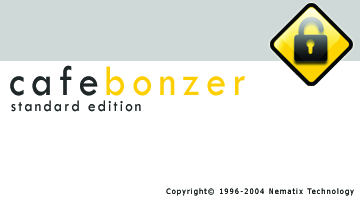
<style>
.page{position:relative;width:360px;height:200px;background:#ffffff}
.page>*{position:absolute;margin:0}
.t1{font:45px "TwCenMT-Regular";letter-spacing:0.2em;color:#fecf00;scale:0.9 1}
.t2{font:45px "TwCenMT-Regular";letter-spacing:0.2em;color:#202728;scale:0.9 1}
.t3{font:16.5px "TwCenMT-Regular";letter-spacing:0.2em;color:#202728;scale:0.9 1}
.t4{font:7.5px "Verdana";letter-spacing:0.2em;color:#060808;scale:0.9 1}
</style>
<div class="page">
<p class="t1" style="left:10px;top:65px;width:235px;height:31px"><span class="t2">cafe</span>bonzer</p>
<p class="t3" style="left:11px;top:100px;width:130px;height:12px">standard edition</p>
<p class="t4" style="left:166px;top:188px;width:188px;height:8px">Copyright© 1996-2004 Nematix Technology</p>
</div>
